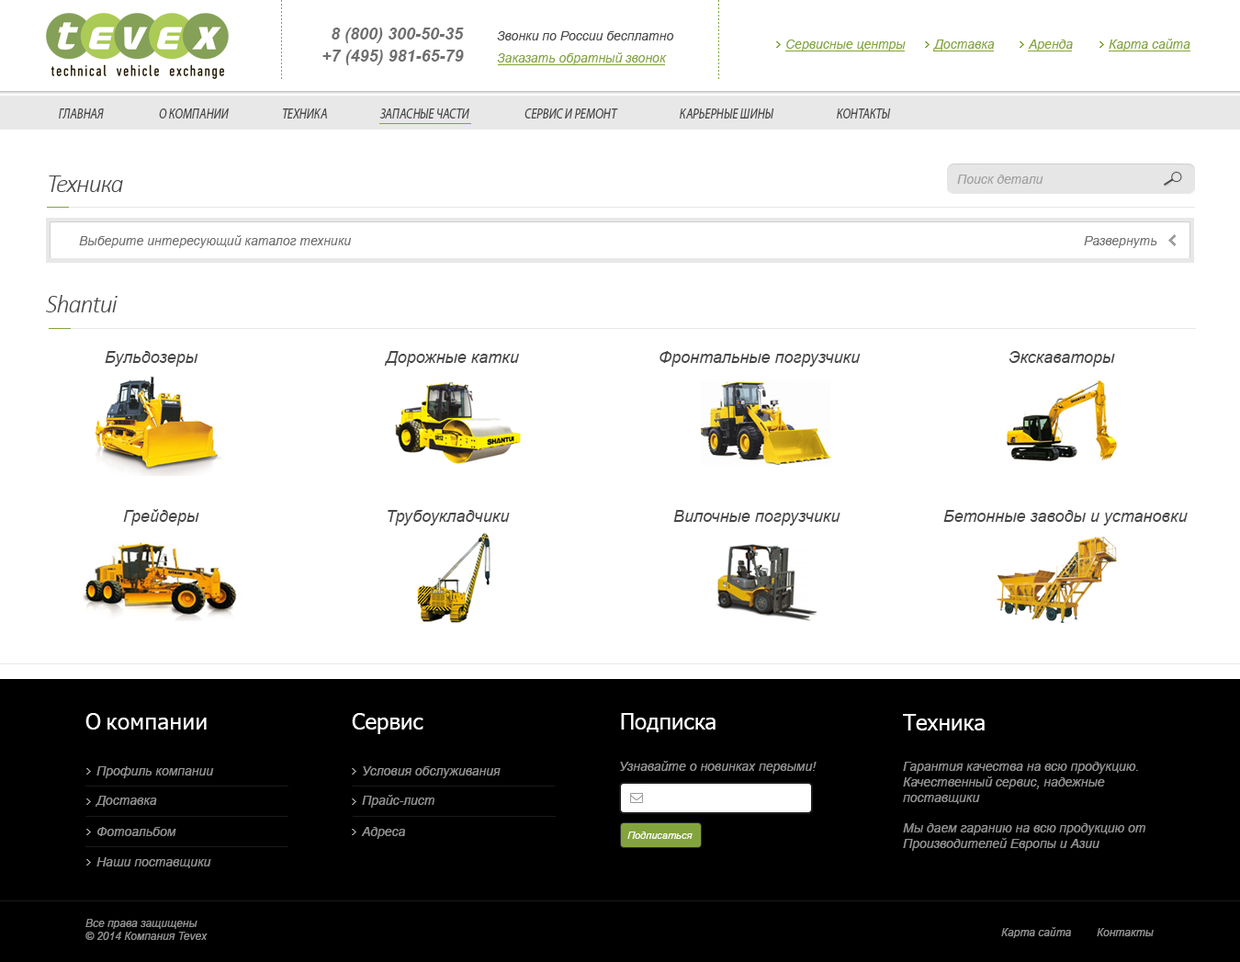
<style>
.page{position:relative;width:1240px;height:962px;background:#ffffff}
.page>*{position:absolute;margin:0}
.t1{font:16.5px "Arial-BoldItalicMT";color:#6f6f6f}
.t2{font:12.9px "Arial-ItalicMT";color:#484848}
.t3{font:12.9px "Arial-ItalicMT";color:#83a43c}
.t4{font:14.9px "MyriadPro-It";color:#484848;scale:0.79 1}
.t5{font:25.7px "Calibri-LightItalic";letter-spacing:-0.04em;color:#484848}
.t6{font:12.9px "Arial-ItalicMT";color:#a0a0a0}
.t7{font:12.9px "Arial-ItalicMT";color:#6f6f6f}
.t8{font:16.5px "Arial-ItalicMT";color:#484848}
.t9{font:22px "Tahoma";letter-spacing:0.02em;color:#ffffff}
.t10{font:22px "Tahoma";color:#ffffff}
.t11{font:12.9px "Arial-ItalicMT";color:#939393}
.t12{font:10.1px "Arial-ItalicMT";color:#ffffff}
.t13{font:11px "Arial-ItalicMT";color:#939393}
</style>
<div class="page">
<p class="t1" style="left:332px;top:28px;width:132px;height:15px">8 (800) 300-50-35</p>
<p class="t2" style="left:497px;top:31px;width:177px;height:9px">Звонки по России бесплатно</p>
<p class="t3" style="left:786px;top:39px;width:120px;height:12px">Сервисные центры</p>
<p class="t3" style="left:933px;top:39px;width:62px;height:12px">Доставка</p>
<p class="t3" style="left:1028px;top:39px;width:45px;height:12px">Аренда</p>
<p class="t3" style="left:1109px;top:39px;width:81px;height:12px">Карта сайта</p>
<p class="t1" style="left:322px;top:50px;width:142px;height:15px">+7 (495) 981-65-79</p>
<p class="t3" style="left:497px;top:52px;width:170px;height:13px">Заказать обратный звонок</p>
<p class="t4" style="left:59px;top:108px;width:45px;height:10px">ГЛАВНАЯ</p>
<p class="t4" style="left:159px;top:108px;width:70px;height:10px">О КОМПАНИИ</p>
<p class="t4" style="left:283px;top:108px;width:44px;height:10px">ТЕХНИКА</p>
<p class="t4" style="left:379px;top:108px;width:90px;height:10px">ЗАПАСНЫЕ ЧАСТИ</p>
<p class="t4" style="left:524px;top:108px;width:94px;height:10px">СЕРВИС И РЕМОНТ</p>
<p class="t4" style="left:680px;top:108px;width:94px;height:10px">КАРЬЕРНЫЕ ШИНЫ</p>
<p class="t4" style="left:837px;top:108px;width:54px;height:10px">КОНТАКТЫ</p>
<p class="t5" style="left:49px;top:175px;width:74px;height:17px">Техника</p>
<p class="t6" style="left:957px;top:175px;width:86px;height:9px">Поиск детали</p>
<p class="t7" style="left:79px;top:235px;width:273px;height:13px">Выберите интересующий каталог техники</p>
<p class="t7" style="left:1084px;top:236px;width:73px;height:12px">Развернуть</p>
<p class="t5" style="left:46px;top:295px;width:72px;height:17px">Shantui</p>
<p class="t8" style="left:105px;top:351px;width:93px;height:15px">Бульдозеры</p>
<p class="t8" style="left:384px;top:351px;width:135px;height:15px">Дорожные катки</p>
<p class="t8" style="left:659px;top:351px;width:202px;height:15px">Фронтальные погрузчики</p>
<p class="t8" style="left:1009px;top:351px;width:106px;height:15px">Экскаваторы</p>
<p class="t8" style="left:123px;top:509px;width:76px;height:16px">Грейдеры</p>
<p class="t8" style="left:388px;top:510px;width:122px;height:15px">Трубоукладчики</p>
<p class="t8" style="left:673px;top:510px;width:167px;height:15px">Вилочные погрузчики</p>
<p class="t8" style="left:943px;top:510px;width:245px;height:15px">Бетонные заводы и установки</p>
<p class="t9" style="left:85px;top:713px;width:122px;height:16px"><span class="t10">О </span>компании</p>
<p class="t10" style="left:352px;top:713px;width:71px;height:21px">Сервис</p>
<p class="t10" style="left:621px;top:713px;width:95px;height:19px">Подписка</p>
<p class="t10" style="left:903px;top:714px;width:82px;height:16px">Техника</p>
<p class="t11" style="left:620px;top:761px;width:197px;height:12px">Узнавайте о новинках первыми!</p>
<p class="t11" style="left:903px;top:761px;width:242px;height:90px">Гарантия качества на всю продукцию.<br>Качественный сервис, надежные <br>поставщики<br><br>Мы даем гаранию на всю продукцию от <br>Производителей Европы и Азии</p>
<p class="t11" style="left:96px;top:766px;width:118px;height:12px">Профиль компании</p>
<p class="t11" style="left:363px;top:766px;width:138px;height:12px">Условия обслуживания</p>
<p class="t11" style="left:96px;top:795px;width:61px;height:11px">Доставка</p>
<p class="t11" style="left:362px;top:794px;width:72px;height:13px">Прайс-лист</p>
<p class="t11" style="left:97px;top:827px;width:79px;height:9px">Фотоальбом</p>
<p class="t11" style="left:361px;top:827px;width:44px;height:12px">Адреса</p>
<p class="t12" style="left:627px;top:831px;width:66px;height:8px">Подписаться</p>
<p class="t11" style="left:96px;top:857px;width:115px;height:11px">Наши поставщики</p>
<p class="t13" style="left:85px;top:918px;width:123px;height:22px">Все права защищены<br>© 2014 Компания Tevex</p>
<p class="t13" style="left:1001px;top:927px;width:70px;height:11px">Карта сайта</p>
<p class="t13" style="left:1097px;top:928px;width:57px;height:8px">Контакты</p>
</div>
